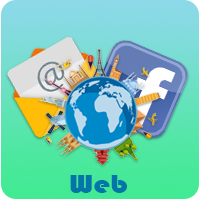
<style>
.page{position:relative;width:199px;height:200px}
.page>*{position:absolute;margin:0}
.t1{font:27.1px "Bauhaus93";color:#0475a9;scale:1.11 1}
</style>
<div class="page">
<p class="t1" style="left:70px;top:175px;width:57px;height:18px">Web</p>
</div>
